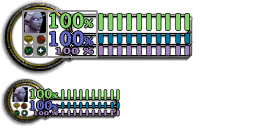
<style>
.page{position:relative;width:256px;height:128px;background:#ffffff}
.page>*{position:absolute;margin:0}
.t1{font:18.7px "LucidaFax-Demi";color:#83d56a}
.t2{font:10.7px "LucidaFax-Demi";color:#83d56a}
.t3{font:18.7px "LucidaFax-Demi";color:#666bcd}
.t4{font:10.7px "LucidaFax-Demi";color:#666bcd}
.t5{font:8px "LucidaFax-Demi";color:#a186be;scale:1.57 1}
.t6{font:11.9px "LucidaFax-Demi";color:#83d56a}
.t7{font:6.8px "LucidaFax-Demi";color:#83d56a}
.t8{font:11.9px "LucidaFax-Demi";color:#666bcd}
.t9{font:6.8px "LucidaFax-Demi";color:#666bcd}
.t10{font:5.1px "LucidaFax-Demi";color:#a186be;scale:1.57 1}
</style>
<div class="page">
<p class="t1" style="left:50px;top:13px;width:43px;height:15px">100<span class="t2">%</span></p>
<p class="t3" style="left:50px;top:31px;width:43px;height:15px">100<span class="t4">%</span></p>
<p class="t5" style="left:56px;top:47px;width:38px;height:7px">100 %</p>
<p class="t6" style="left:30px;top:89px;width:28px;height:10px">100<span class="t7">%</span></p>
<p class="t8" style="left:30px;top:100px;width:28px;height:10px">100<span class="t9">%</span></p>
<p class="t10" style="left:34px;top:111px;width:24px;height:5px">100 %</p>
</div>
